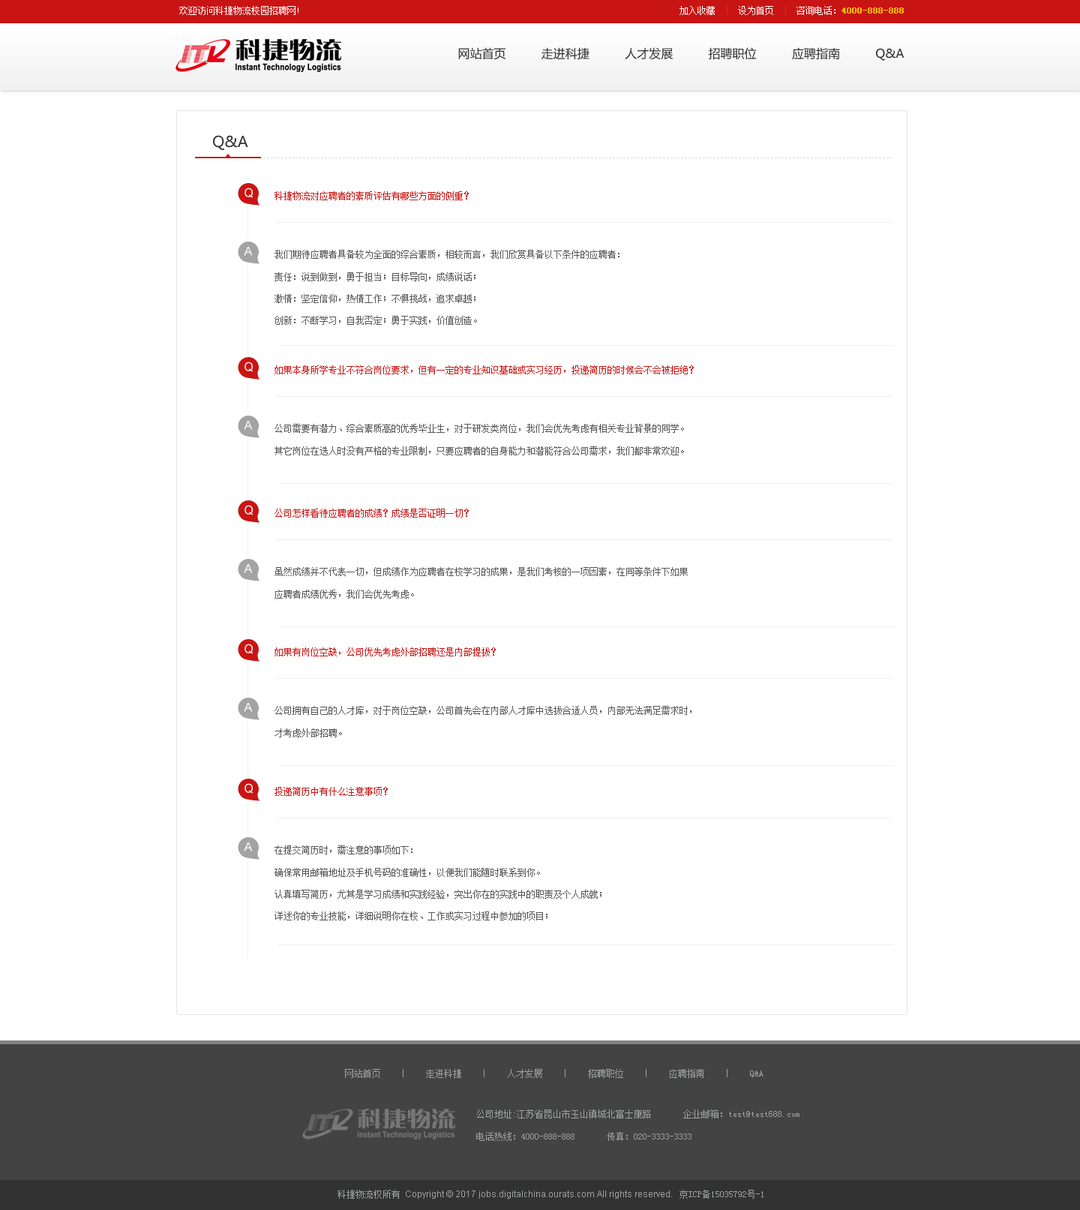
<style>
.page{position:relative;width:1080px;height:1210px;background:#ffffff}
.page>*{position:absolute;margin:0}
.t1{font:9px "SimSun";color:#ffffff}
.t2{font:9px "SimSun";color:#febf00;font-weight:bold}
.t3{font:9px "SimSun";color:#e62422}
.t4{font:12px "MicrosoftYaHei";color:#313131}
.t5{font:15px "MicrosoftYaHei";color:#333333}
.t6{font:6px "SimSun";letter-spacing:0.1em;color:#d9d9d9}
.t7{font:12px "ArialMT";color:#ffffff}
.t8{font:9px "SimSun";color:#c81513}
.t9{font:9px/13.5px "SimSun";color:#575656}
.t10{font:9px "SimSun";color:#9ea1a2}
.t11{font:9px/11.2px "SimSun";color:#9ea1a2}
.t12{font:9px "ArialMT";color:#9ea1a2}
</style>
<div class="page">
<p class="t1" style="left:179px;top:6px;width:119px;height:9px">欢迎访问科捷物流校园招聘网!</p>
<p class="t2" style="left:680px;top:6px;width:224px;height:9px"><span class="t1"> 加入收藏</span><span class="t3">  |  </span><span class="t1">设为首页</span><span class="t3">  |  </span><span class="t1">咨询电话：</span>4000-888-888</p>
<p class="t4" style="left:458px;top:47px;width:446px;height:14px">网站首页          走进科捷          人才发展          招聘职位          应聘指南          Q&amp;A</p>
<p class="t5" style="left:213px;top:135px;width:35px;height:15px">Q&amp;A</p>
<p class="t6" style="left:263px;top:158px;width:629px;height:0px">-------------------------------------------------------------------------------------------------------------------------------------------------------------------------------</p>
<p class="t7" style="left:244px;top:188px;width:10px;height:10px">Q</p>
<p class="t8" style="left:274px;top:191px;width:195px;height:9px">科捷物流对应聘者的素质评估有哪些方面的侧重？</p>
<p class="t7" style="left:244px;top:247px;width:9px;height:9px">A</p>
<p class="t9" style="left:274px;top:250px;width:346px;height:75px">我们期待应聘者具备较为全面的综合素质，相较而言，我们欣赏具备以下条件的应聘者：<br>责任：说到做到，勇于担当；目标导向，成绩说话；<br>激情：坚定信仰，热情工作；不惧挑战，追求卓越；<br>创新：不断学习，自我否定；勇于实践，价值创造。</p>
<p class="t7" style="left:244px;top:362px;width:10px;height:10px">Q</p>
<p class="t8" style="left:274px;top:365px;width:420px;height:9px">如果本身所学专业不符合岗位要求，但有一定的专业知识基础或实习经历，投递简历的时候会不会被拒绝？</p>
<p class="t7" style="left:244px;top:421px;width:9px;height:9px">A</p>
<p class="t9" style="left:274px;top:424px;width:410px;height:31px">公司需要有潜力、综合素质高的优秀毕业生，对于研发类岗位，我们会优先考虑有相关专业背景的同学。<br>其它岗位在选人时没有严格的专业限制，只要应聘者的自身能力和潜能符合公司需求，我们都非常欢迎。</p>
<p class="t7" style="left:244px;top:505px;width:10px;height:10px">Q</p>
<p class="t8" style="left:274px;top:508px;width:195px;height:10px">公司怎样看待应聘者的成绩？成绩是否证明一切？</p>
<p class="t7" style="left:244px;top:564px;width:9px;height:9px">A</p>
<p class="t9" style="left:274px;top:567px;width:414px;height:31px">虽然成绩并不代表一切，但成绩作为应聘者在校学习的成果，是我们考核的一项因素，在同等条件下如果<br>应聘者成绩优秀，我们会优先考虑。</p>
<p class="t7" style="left:244px;top:644px;width:10px;height:10px">Q</p>
<p class="t8" style="left:274px;top:647px;width:222px;height:9px">如果有岗位空缺，公司优先考虑外部招聘还是内部提拔？</p>
<p class="t7" style="left:244px;top:703px;width:9px;height:9px">A</p>
<p class="t9" style="left:274px;top:706px;width:418px;height:31px">公司拥有自己的人才库，对于岗位空缺，公司首先会在内部人才库中选拔合适人员，内部无法满足需求时，<br>才考虑外部招聘。</p>
<p class="t7" style="left:244px;top:783px;width:10px;height:11px">Q</p>
<p class="t8" style="left:274px;top:787px;width:114px;height:9px">投递简历中有什么注意事项？</p>
<p class="t7" style="left:244px;top:842px;width:9px;height:9px">A</p>
<p class="t9" style="left:274px;top:845px;width:328px;height:75px">在提交简历时，需注意的事项如下：<br>确保常用邮箱地址及手机号码的准确性，以便我们能随时联系到你。<br>认真填写简历，尤其是学习成绩和实践经验，突出你在的实践中的职责及个人成就；<br>详述你的专业技能，详细说明你在校、工作或实习过程中参加的项目；</p>
<p class="t10" style="left:345px;top:1069px;width:419px;height:9px">网站首页　　｜　　走进科捷　　｜　　人才发展　　｜　　招聘职位　　｜　　应聘指南　　｜　　Q&amp;A</p>
<p class="t11" style="left:476px;top:1109px;width:324px;height:32px">公司地址:江苏省昆山市玉山镇城北富士康路 　　　企业邮箱：test@test688.com<br><br>电话热线：4000-888-888 　　　传真：020-3333-3333</p>
<p class="t12" style="left:338px;top:1190px;width:426px;height:8px"><span class="t10">科捷物流权所有 </span>Copyright © 2017 jobs.digitalchina.ourats.com All rights reserved.   <span class="t10">京ICP备15035792号-1</span></p>
</div>
